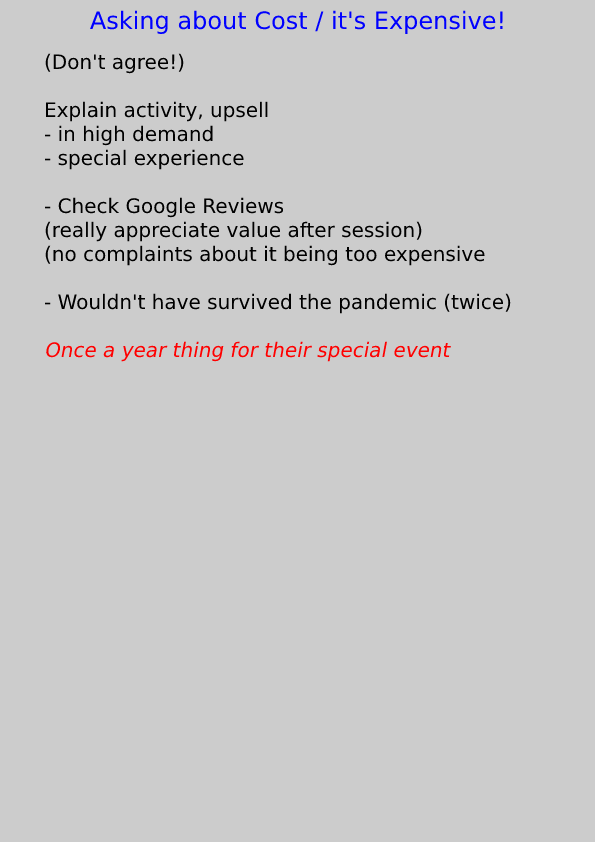
<style>
.page{position:relative;width:595px;height:842px;background:#cccccc}
.page>*{position:absolute;margin:0}
.t1{font:24px "DejaVuSans";color:#0000ff}
.t2{font:20px "DejaVuSans";color:#000000}
.t3{font:20px "DejaVuSans";color:#ff0000;font-style:italic}
</style>
<div class="page">
<p class="t1" style="left:90px;top:10px;width:413px;height:24px">Asking about Cost / it's Expensive!</p>
<p class="t2" style="left:44px;top:53px;width:467px;height:309px">(Don't agree!)<br><br>Explain activity, upsell<br>- in high demand<br>- special experience<br><br>- Check Google Reviews<br>(really appreciate value after session)<br>(no complaints about it being too expensive<br><br>- Wouldn't have survived the pandemic (twice)<br><br><span class="t3">Once a year thing for their special event</span></p>
</div>
